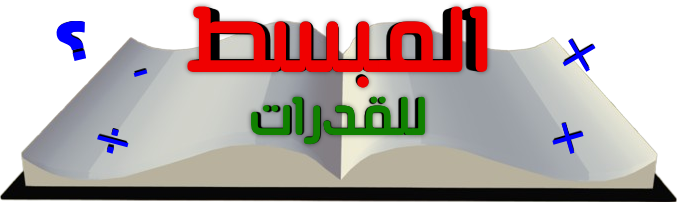
<style>
.page{position:relative;width:677px;height:202px;background:#ffffff}
.page>*{position:absolute;margin:0}
.t1{font:101px "AirStripArabic";color:#f00101}
.t2{font:50px "AATYPO-Bold";color:#0000ff}
.t3{font:50px "DejaVuSans";color:#0000ff}
.t4{font:59px "AirStripArabic";color:#108100}
</style>
<div class="page">
<p class="t1" style="left:187px;top:6px;width:301px;height:82px">المبسط</p>
<p class="t2" style="left:56px;top:20px;width:31px;height:42px;rotate:-13deg">؟</p>
<p class="t3" style="left:562px;top:38px;width:34px;height:34px;rotate:14deg">×</p>
<p class="t3" style="left:133px;top:69px;width:15px;height:9px;rotate:-16deg">-</p>
<p class="t4" style="left:251px;top:96px;width:174px;height:49px">للقدرات</p>
<p class="t3" style="left:552px;top:122px;width:32px;height:32px;rotate:-16deg">+</p>
<p class="t3" style="left:97px;top:128px;width:32px;height:26px;rotate:15deg">÷</p>
</div>
